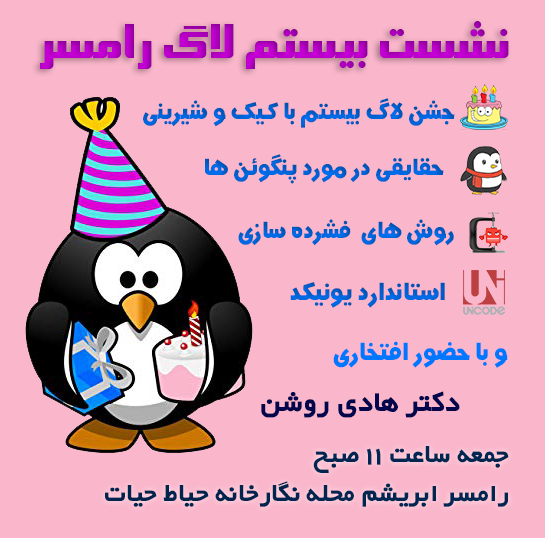
<style>
.page{position:relative;width:545px;height:538px;background:#fab6cb}
.page>*{position:absolute;margin:0}
.t1{font:45px "BSinaBold";color:#b500c4}
.t2{font:30px "Wtanin";color:#0063d4}
.t3{font:30px "Wtanin";color:#0064d7}
.t4{font:30px "Wtanin";color:#0063d5}
.t5{font:32px "Wtanin";color:#0063d5}
.t6{font:32px "Wtanin";color:#0077ff}
.t7{font:36px "WyekanBold";color:#02064d}
.t8{font:32px "WyekanBold";color:#002651}
</style>
<div class="page">
<p class="t1" style="left:40px;top:21px;width:469px;height:48px">نشست بیستم لاگ رامسر</p>
<p class="t2" style="left:143px;top:98px;width:312px;height:30px">جشن لاگ بیستم با کیک و شیرینی</p>
<p class="t3" style="left:205px;top:154px;width:239px;height:30px">حقایقی در مورد پنگوئن ها</p>
<p class="t4" style="left:238px;top:219px;width:216px;height:27px">روش های  فشرده سازی</p>
<p class="t5" style="left:290px;top:282px;width:155px;height:26px">استاندارد یونیکد</p>
<p class="t6" style="left:333px;top:341px;width:175px;height:27px">و با حضور افتخاری</p>
<p class="t7" style="left:261px;top:391px;width:199px;height:27px">دکتر هادی روشن</p>
<p class="t8" style="left:105px;top:446px;width:404px;height:61px;text-align:right">جمعه ساعت 11 صبح<br>رامسر ابریشم محله نگارخانه حیاط حیات</p>
</div>
